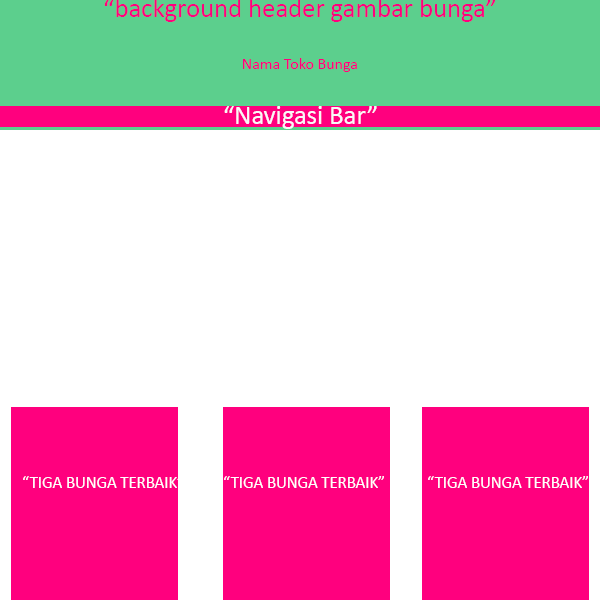
<style>
.page{position:relative;width:600px;height:600px;background:#ffffff}
.page>*{position:absolute;margin:0}
.t1{font:26.7px "Calibri";color:#ff007e}
.t2{font:16px "Calibri";color:#ff007e}
.t3{font:26.7px "Calibri";color:#f9f8f9}
.t4{font:16.7px "Calibri";color:#ffffff}
</style>
<div class="page">
<p class="t1" style="left:104px;top:0px;width:392px;height:22px">“background header gambar bunga”</p>
<p class="t2" style="left:243px;top:58px;width:114px;height:14px">Nama Toko Bunga</p>
<p class="t3" style="left:224px;top:106px;width:153px;height:23px">“Navigasi Bar”</p>
<p class="t4" style="left:23px;top:476px;width:160px;height:12px">“TIGA BUNGA TERBAIK”</p>
<p class="t4" style="left:224px;top:476px;width:160px;height:12px">“TIGA BUNGA TERBAIK”</p>
<p class="t4" style="left:428px;top:476px;width:160px;height:12px">“TIGA BUNGA TERBAIK”</p>
</div>
